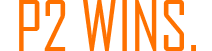
<style>
.page{position:relative;width:212px;height:51px;background:#ffffff}
.page>*{position:absolute;margin:0}
.t1{font:66.7px "AgencyFB-Reg";color:#fe7100}
</style>
<div class="page">
<p class="t1" style="left:19px;top:0px;width:177px;height:51px">P2 WINS.</p>
</div>
